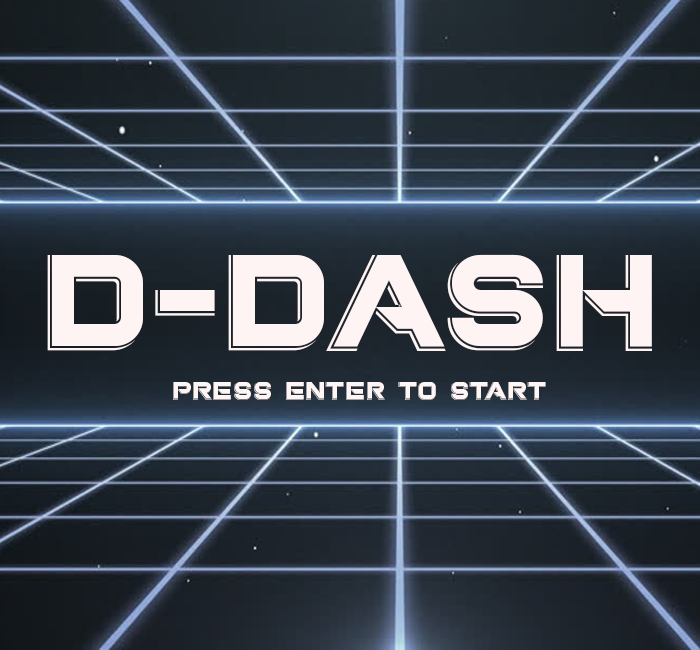
<style>
.page{position:relative;width:700px;height:650px}
.page>*{position:absolute;margin:0}
.t1{font:129.8px "SummitBold-Display";color:#fff5f5}
.t2{font:24px "SummitBold-Display";color:#fff5f5}
</style>
<div class="page">
<p class="t1" style="left:47px;top:254px;width:605px;height:97px">D-Dash</p>
<p class="t2" style="left:173px;top:382px;width:373px;height:18px">Press Enter to Start</p>
</div>
